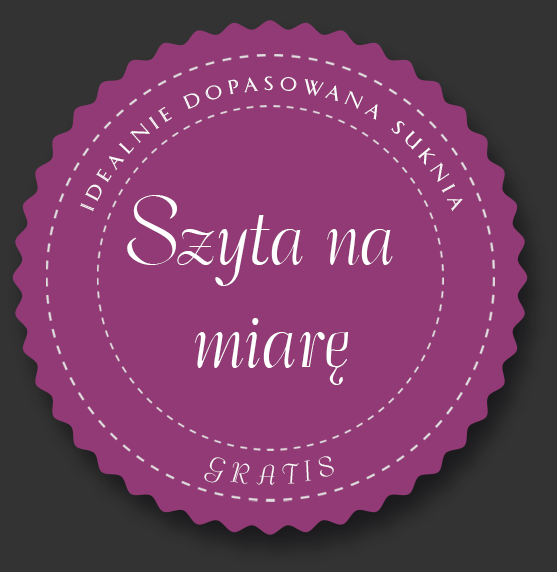
<style>
.page{position:relative;width:557px;height:572px;background:#913a75}
.page>*{position:absolute;margin:0}
.t1{font:17.5px "EFNLinneus";letter-spacing:0.403em;color:#ffffff}
.t2{font:85.2px "BallroomTango";color:#fefefe}
.t3{font:24px "BallroomTango";letter-spacing:0.403em;color:#ffffff}
</style>
<div class="page">
<p class="t1" style="left:80px;top:76px;width:383px;height:136px;text-align:center">Idealnie dopasowana suknia</p>
<p class="t2" style="left:127px;top:195px;width:266px;height:190px;text-align:center">Szyta na <br>miarę</p>
<p class="t3" style="left:204px;top:456px;width:130px;height:29px">GRATIS</p>
</div>
